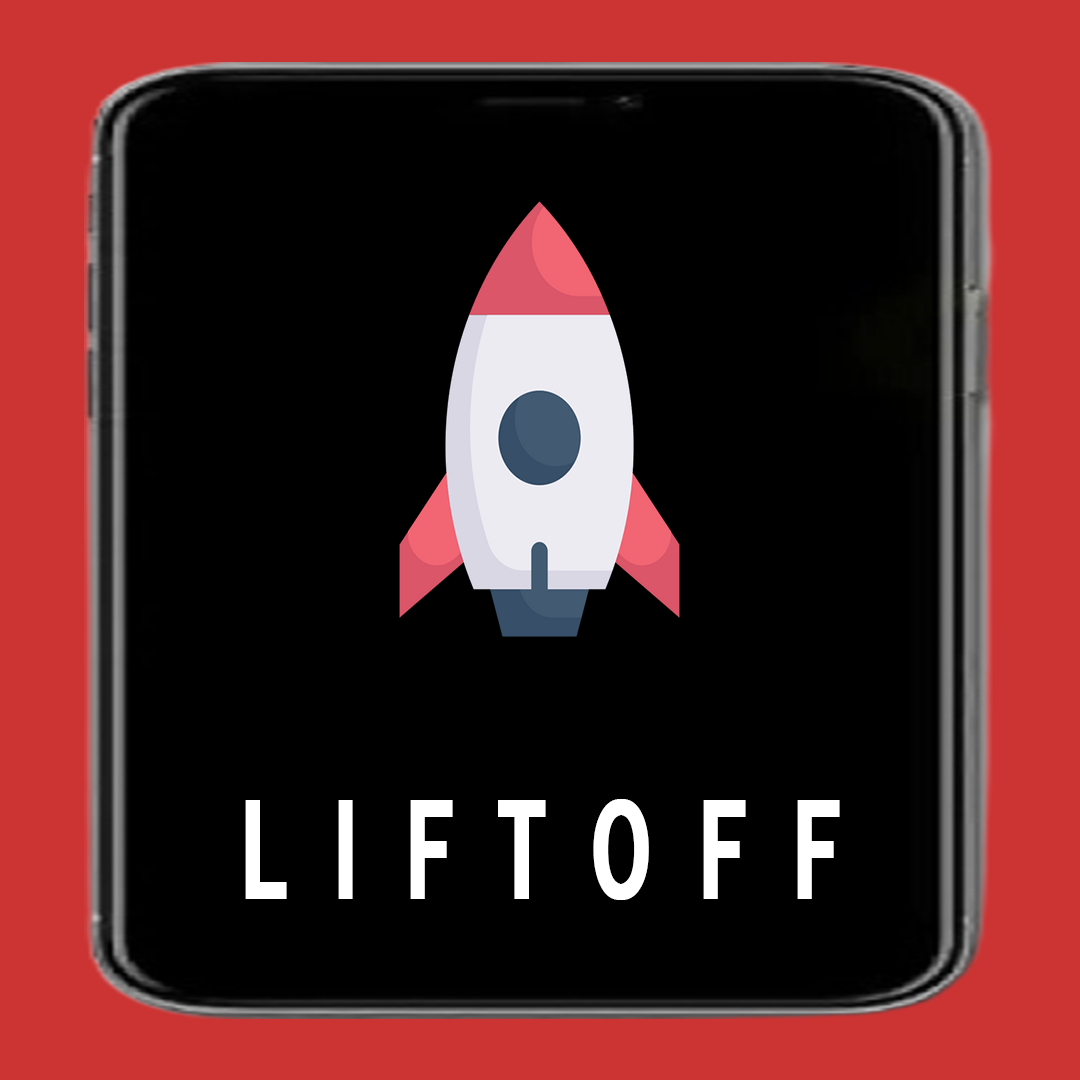
<style>
.page{position:relative;width:1080px;height:1080px;background:#000000}
.page>*{position:absolute;margin:0}
.t1{font:145px "FranklinGothic-Medium";letter-spacing:0.1em;color:#ffffff;text-transform:uppercase;font-weight:bold;scale:0.64 1}
</style>
<div class="page">
<p class="t1" style="left:245px;top:799px;width:595px;height:101px">L i f t o f f</p>
</div>
